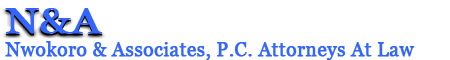
<style>
.page{position:relative;width:450px;height:60px;background:#ffffff}
.page>*{position:absolute;margin:0}
.t1{font:36px "Georgia";color:#3366ff;font-weight:bold;scale:1.21 1}
.t2{font:20px "Georgia";color:#3366ff;font-weight:bold;scale:0.96 1}
</style>
<div class="page">
<p class="t1" style="left:5px;top:8px;width:98px;height:26px">N&amp;A</p>
<p class="t2" style="left:5px;top:41px;width:410px;height:20px">Nwokoro &amp; Associates, P.C. Attorneys At Law</p>
</div>
